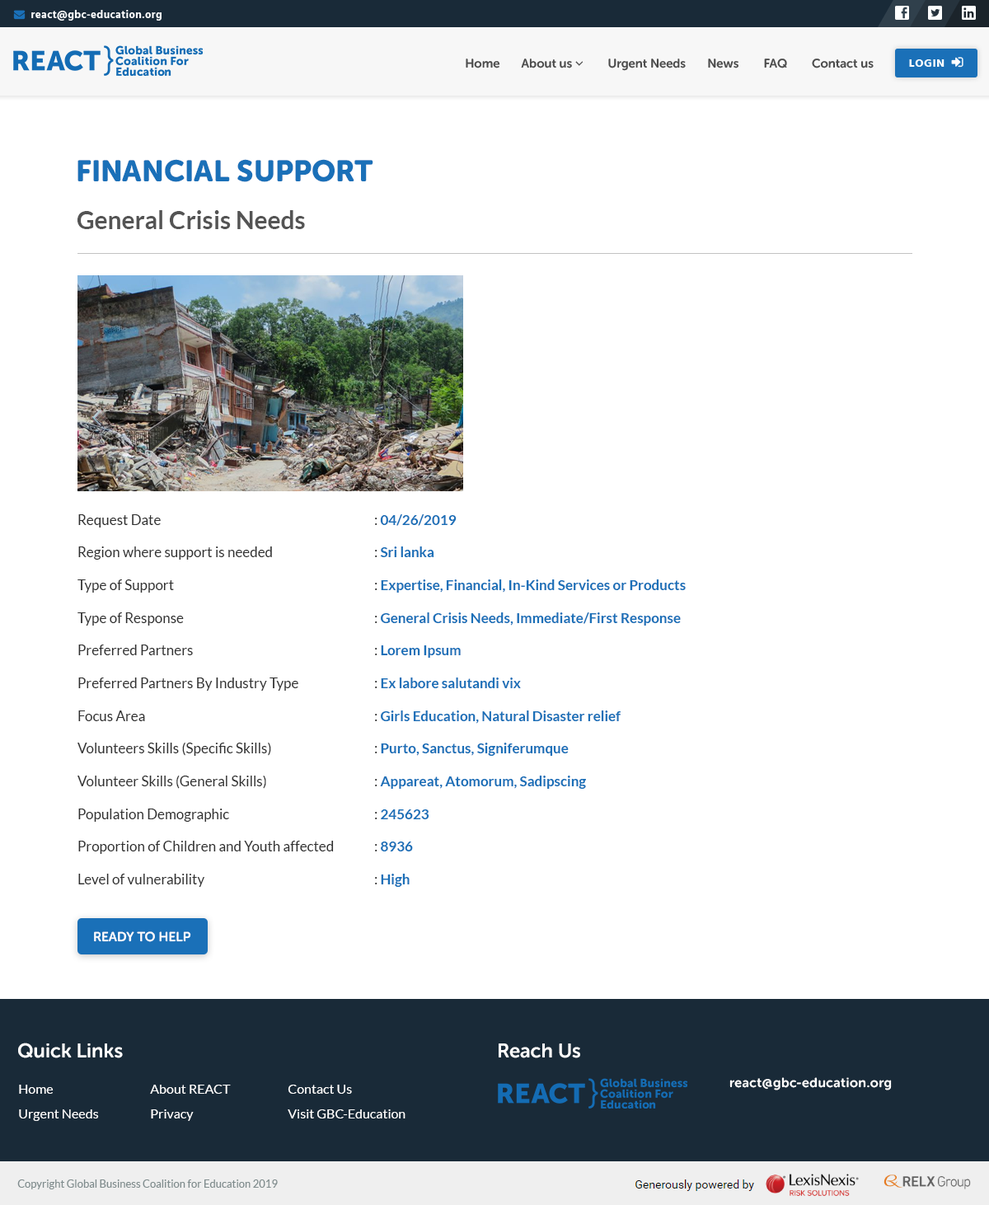
<style>
.page{position:relative;width:989px;height:1205px;background:#ffffff}
.page>*{position:absolute;margin:0}
.t1{font:29.7px "MuseoSansW01-Rounded900";color:#1a70b8;text-transform:uppercase}
.t2{font:24.7px "Lato-Bold";color:#545454}
.t3{font:14px/21.2px "Lato-Bold";color:#1a70b8}
.t4{font:14px/21.2px "Lato-Regular";color:#303030}
.t5{font:13.2px "MuseoSansRounded-700";color:#ffffff;text-transform:uppercase}
.t6{font:19.8px "MuseoSansRounded-700";color:#ffffff}
.t7{font:13.2px/24.7px "Lato-Regular";color:#ffffff}
.t8{font:13.2px "MuseoSansRounded-700";letter-spacing:0.03em;color:#ffffff}
.t9{font:10.7px "Lato-Regular";color:#7f8c8d}
</style>
<div class="page">
<p class="t1" style="left:77px;top:159px;width:296px;height:23px">Financial Support</p>
<p class="t2" style="left:77px;top:210px;width:228px;height:19px">General Crisis Needs</p>
<p class="t3" style="left:77px;top:514px;width:609px;height:373px;text-align:justify"><span class="t4">Request Date        : </span>04/26/2019<br><span class="t4">Region where support is needed    : </span>Sri lanka <br><span class="t4">Type of Support       : </span>Expertise, Financial, In-Kind Services or Products<br><span class="t4">Type of Response       : </span>General Crisis Needs, Immediate/First Response<br><span class="t4">Preferred Partners       : </span>Lorem Ipsum<br><span class="t4">Preferred Partners By Industry Type   : </span>Ex labore salutandi vix<br><span class="t4">Focus Area        : </span>Girls Education, Natural Disaster relief<br><span class="t4">Volunteers Skills (Specific Skills)    : </span>Purto, Sanctus, Signiferumque<br><span class="t4">Volunteer Skills (General Skills)    : </span>Appareat, Atomorum, Sadipscing<br><span class="t4">Population Demographic     : </span>245623<br><span class="t4">Proportion of Children and Youth affected  : </span>8936<br><span class="t4">Level of vulnerability      : </span>High</p>
<p class="t5" style="left:94px;top:932px;width:97px;height:10px">Ready to help</p>
<p class="t6" style="left:18px;top:1043px;width:105px;height:16px">Quick Links</p>
<p class="t6" style="left:499px;top:1044px;width:81px;height:15px">Reach Us</p>
<p class="t7" style="left:19px;top:1085px;width:80px;height:36px;text-align:justify">Home<br>Urgent Needs</p>
<p class="t7" style="left:150px;top:1085px;width:81px;height:36px;text-align:justify">About REACT<br>Privacy</p>
<p class="t7" style="left:288px;top:1085px;width:118px;height:34px;text-align:justify">Contact Us<br>Visit GBC-Education</p>
<p class="t8" style="left:730px;top:1078px;width:162px;height:13px">react@gbc-education.org</p>
<p class="t9" style="left:17px;top:1180px;width:261px;height:10px">Copyright Global Business Coalition for Education 2019</p>
</div>
